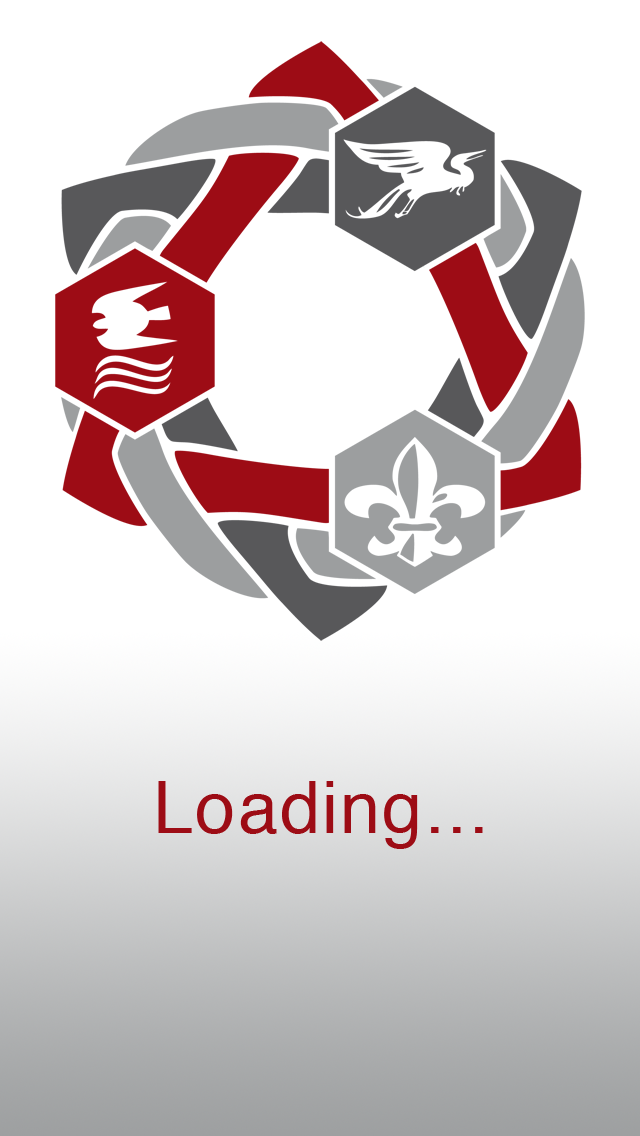
<style>
.page{position:relative;width:640px;height:1136px;background:#ffffff}
.page>*{position:absolute;margin:0}
.t1{font:72px "Helvetica";letter-spacing:0.03em;color:#9d0c15}
</style>
<div class="page">
<p class="t1" style="left:158px;top:781px;width:325px;height:68px">Loading...</p>
</div>
